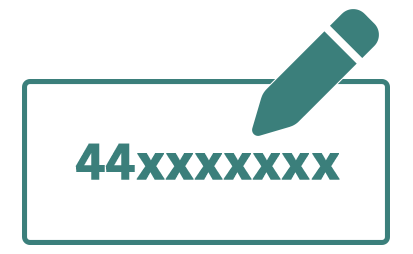
<style>
.page{position:relative;width:413px;height:254px;background:#ffffff}
.page>*{position:absolute;margin:0}
.t1{font:52.5px "BahijTheSansArabic-Bold";color:#3b7f7b;font-weight:bold}
</style>
<div class="page">
<p class="t1" style="left:75px;top:143px;width:265px;height:37px">44xxxxxxx</p>
</div>
